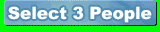
<style>
.page{position:relative;width:160px;height:32px;background:#00ff00}
.page>*{position:absolute;margin:0}
.t1{font:17.1px "Arial-Black";color:#ffffff}
</style>
<div class="page">
<p class="t1" style="left:8px;top:6px;width:144px;height:17px">Select 3 People</p>
</div>
